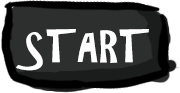
<style>
.page{position:relative;width:180px;height:93px;background:#2d2e2e}
.page>*{position:absolute;margin:0}
.t1{font:41.7px "ARCHRISTY";color:#ffffff}
</style>
<div class="page">
<p class="t1" style="left:16px;top:29px;width:133px;height:42px">START</p>
<p class="t1" style="left:16px;top:29px;width:133px;height:42px">START</p>
</div>
